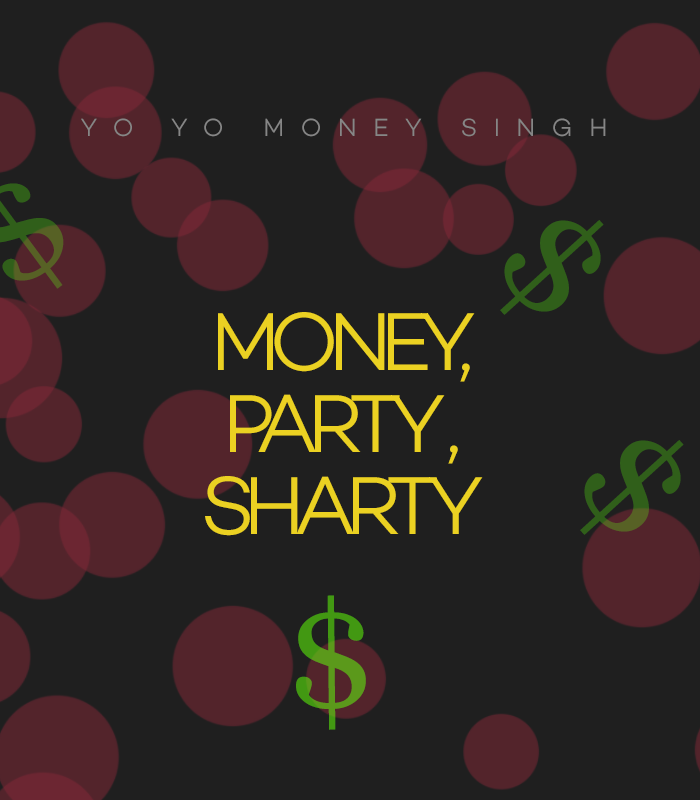
<style>
.page{position:relative;width:700px;height:800px;background:#1f1f1f}
.page>*{position:absolute;margin:0}
.t1{font:25.2px "Campton-LightDEMO";letter-spacing:0.64em;color:#868686;text-transform:uppercase}
.t2{font:150.2px "Georgia";letter-spacing:0.64em;color:#305f1a;text-transform:uppercase}
.t3{font:83.5px/82.2px "Campton-LightDEMO";letter-spacing:-0.14em;color:#ebd122;text-transform:uppercase}
.t4{font:150.2px "Georgia";letter-spacing:0.64em;color:#519918;text-transform:uppercase}
</style>
<div class="page">
<p class="t1" style="left:81px;top:118px;width:525px;height:19px">Yo yo money singh</p>
<p class="t2" style="left:500px;top:220px;width:104px;height:95px;rotate:48deg">$</p>
<p class="t3" style="left:205px;top:312px;width:278px;height:224px;text-align:center">Money,<br>Party ,<br>sharty</p>
<p class="t2" style="left:580px;top:440px;width:104px;height:95px;rotate:48deg">$</p>
<p class="t4" style="left:296px;top:595px;width:70px;height:135px;rotate:-1deg">$</p>
</div>
